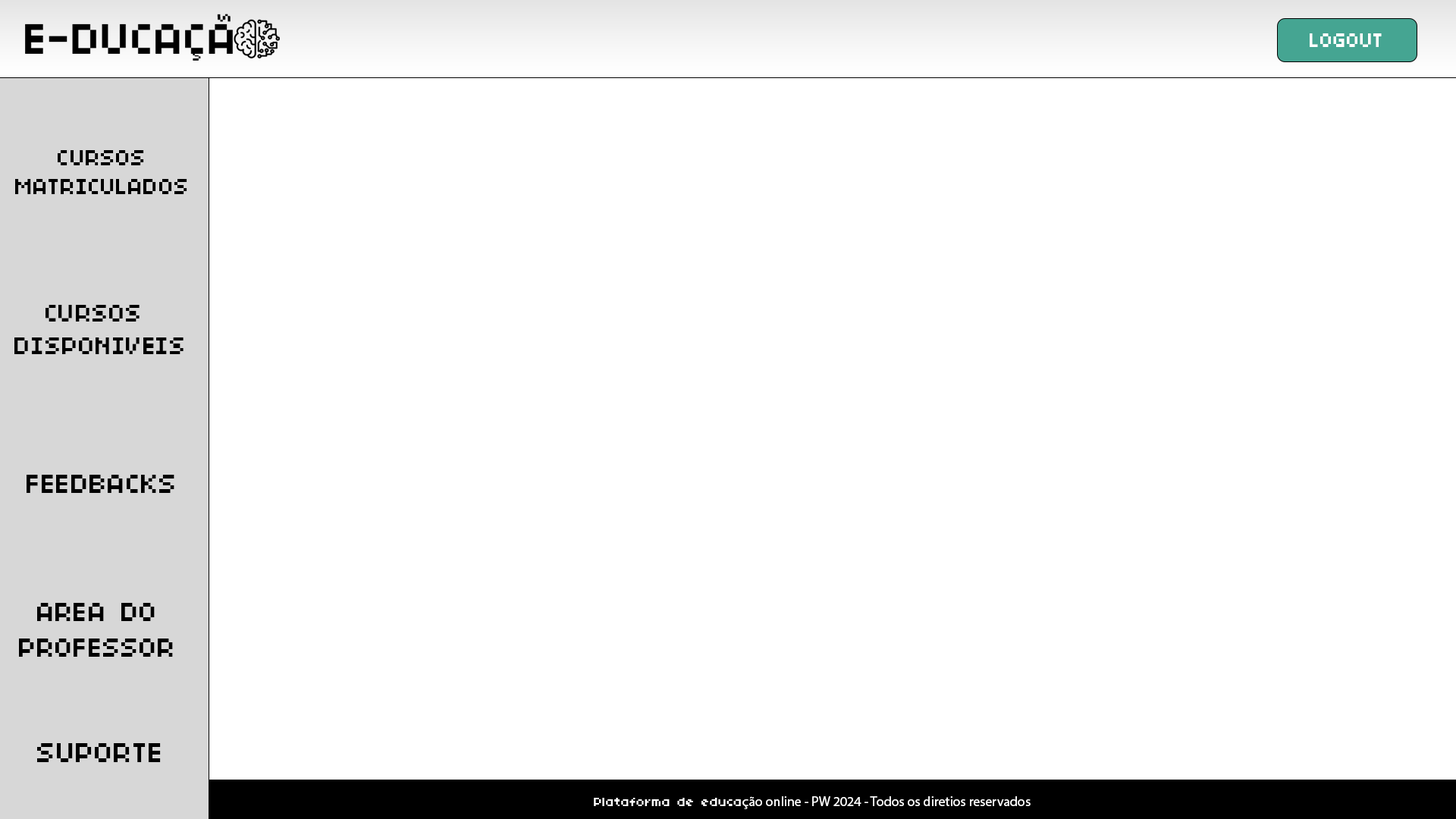
<style>
.page{position:relative;width:1456px;height:819px;background:#ffffff}
.page>*{position:absolute;margin:0}
.t1{font:21.3px "04b03";color:#ffffff}
.t2{font:24.5px "04b03";color:#000000}
.t3{font:27px "04b03";color:#000000}
.t4{font:29.5px "04b03";color:#000000}
.t5{font:29.3px "04b03";color:#000000}
.t6{font:30.7px "04b03";color:#000000}
.t7{font:13.6px "MyriadPro-Regular";color:#ffffff}
.t8{font:13.6px "04b03";color:#ffffff}
</style>
<div class="page">
<p class="t1" style="left:1310px;top:33px;width:72px;height:14px">LOGOUT</p>
<p class="t2" style="left:15px;top:150px;width:172px;height:44px;text-align:center">CURSOS<br>MATRICULADOS</p>
<p class="t3" style="left:14px;top:305px;width:170px;height:49px;text-align:center">CURSOS <br>DISPONIVEIS</p>
<p class="t4" style="left:27px;top:475px;width:147px;height:18px">FEEDBACKS</p>
<p class="t5" style="left:19px;top:603px;width:154px;height:54px;text-align:center">AREA DO<br>PROFESSOR</p>
<p class="t6" style="left:37px;top:743px;width:124px;height:19px">SUPORTE</p>
<p class="t7" style="left:594px;top:796px;width:437px;height:13px"><span class="t8">Plataforma de educa</span>ção online - PW 2024 - Todos os diretios reservados</p>
</div>
